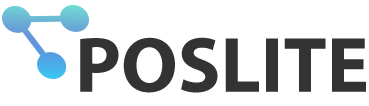
<style>
.page{position:relative;width:369px;height:106px;background:#ffffff}
.page>*{position:absolute;margin:0}
.t1{font:79.2px "MyriadPro-Bold";color:#333333}
</style>
<div class="page">
<p class="t1" style="left:80px;top:37px;width:286px;height:56px">POSLITE</p>
</div>
